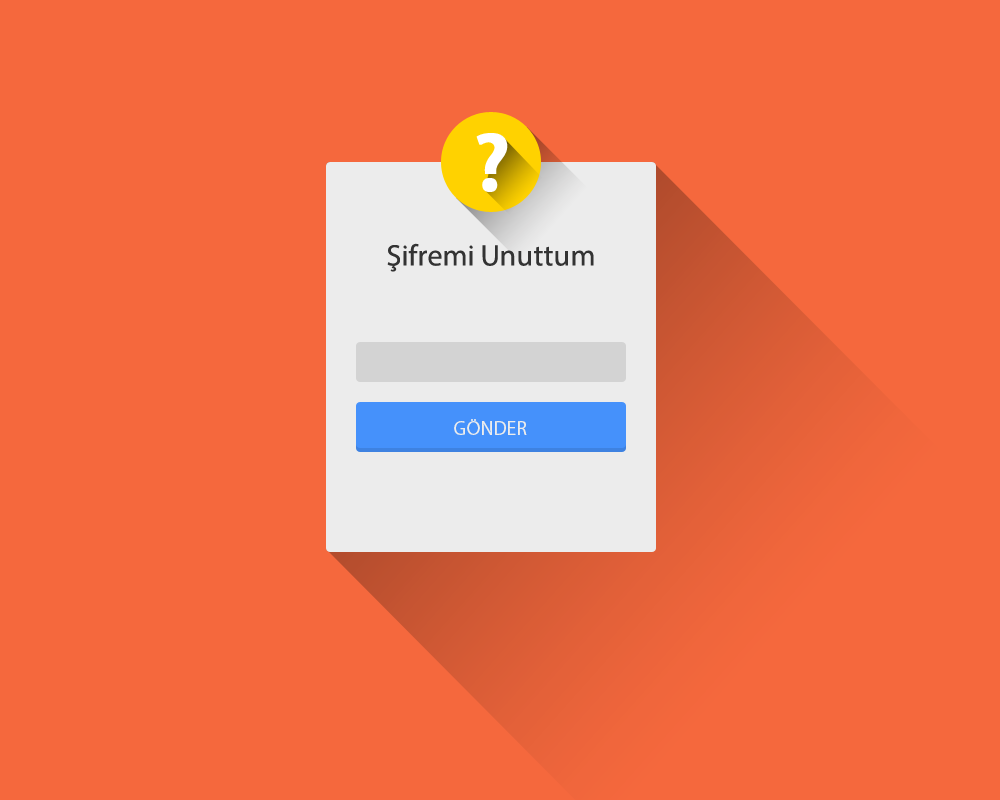
<style>
.page{position:relative;width:1000px;height:800px;background:#f5683d}
.page>*{position:absolute;margin:0}
.t1{font:83.3px "MyriadPro-Semibold";color:#ffffff;font-weight:bold}
.t2{font:29.8px "MyriadPro-Regular";color:#333333}
.t3{font:20px "MyriadPro-Regular";color:#ececec;text-transform:uppercase}
</style>
<div class="page">
<p class="t1" style="left:476px;top:133px;width:32px;height:59px">?</p>
<p class="t2" style="left:387px;top:243px;width:207px;height:29px">Şifremi Unuttum</p>
<p class="t3" style="left:454px;top:419px;width:73px;height:16px">GÖNDER</p>
</div>
